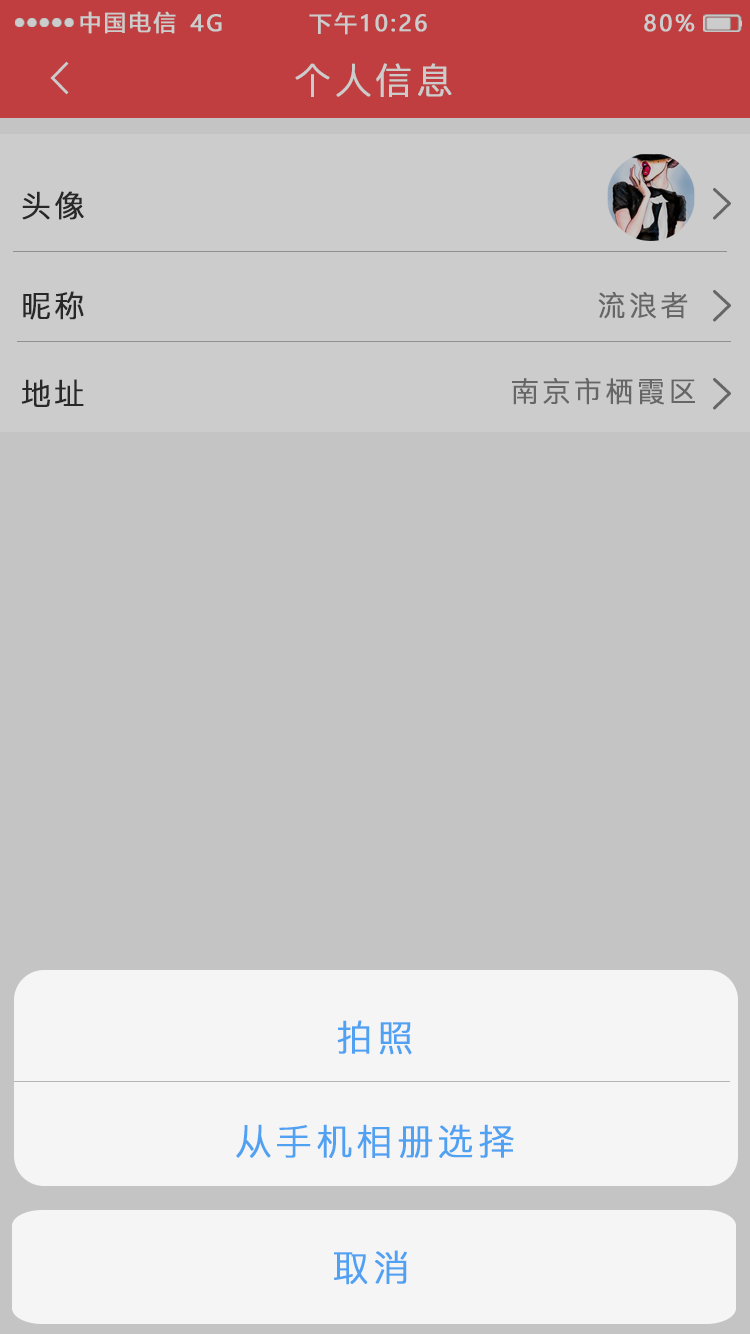
<style>
.page{position:relative;width:750px;height:1334px;background:#c4c4c4}
.page>*{position:absolute;margin:0}
.t1{font:22px "MicrosoftYaHei";letter-spacing:0.1em;color:#cccccc;text-transform:uppercase;font-weight:bold}
.t2{font:36px "PingFang-SC-Regular";letter-spacing:0.1em;color:#cccccc;text-transform:uppercase;font-weight:bold}
.t3{font:30px "PingFang-SC-Regular";letter-spacing:0.1em;color:#323233;text-transform:uppercase;font-weight:bold}
.t4{font:28px "PingFang-SC-Regular";letter-spacing:0.1em;color:#666666;text-transform:uppercase;font-weight:bold}
.t5{font:36px "PingFang-SC-Regular";letter-spacing:0.1em;color:#51a1f3;text-transform:uppercase;font-weight:bold}
</style>
<div class="page">
<p class="t1" style="left:80px;top:11px;width:96px;height:23px">中国电信</p>
<p class="t1" style="left:190px;top:14px;width:32px;height:18px">4G</p>
<p class="t1" style="left:309px;top:12px;width:118px;height:23px">下午10:26</p>
<p class="t1" style="left:644px;top:14px;width:51px;height:18px">80%</p>
<p class="t2" style="left:295px;top:63px;width:157px;height:34px">个人信息</p>
<p class="t3" style="left:22px;top:191px;width:62px;height:29px">头像</p>
<p class="t3" style="left:23px;top:291px;width:61px;height:29px">昵称</p>
<p class="t4" style="left:598px;top:292px;width:90px;height:27px">流浪者</p>
<p class="t3" style="left:21px;top:379px;width:63px;height:28px">地址</p>
<p class="t4" style="left:512px;top:378px;width:183px;height:27px">南京市栖霞区</p>
<p class="t5" style="left:337px;top:1020px;width:75px;height:35px">拍照</p>
<p class="t5" style="left:236px;top:1124px;width:278px;height:34px">从手机相册选择</p>
<p class="t5" style="left:334px;top:1250px;width:73px;height:35px">取消</p>
</div>
